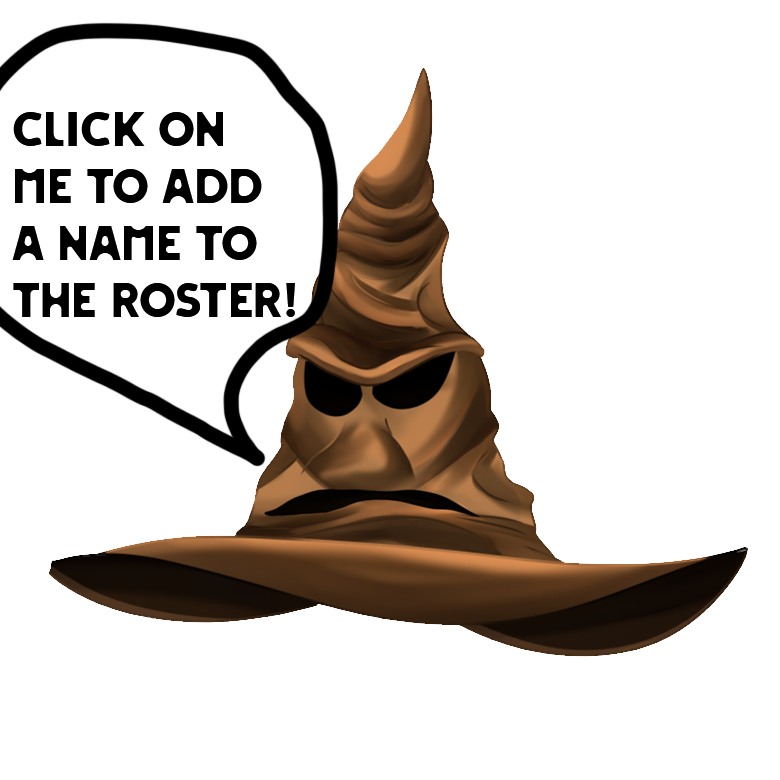
<style>
.page{position:relative;width:780px;height:780px;background:#ffffff}
.page>*{position:absolute;margin:0}
.t1{font:44.8px/56.9px "FORTA";color:#000000}
</style>
<div class="page">
<p class="t1" style="left:12px;top:112px;width:283px;height:205px">click on <br>me to add<br>a name to <br>the roster!</p>
</div>
